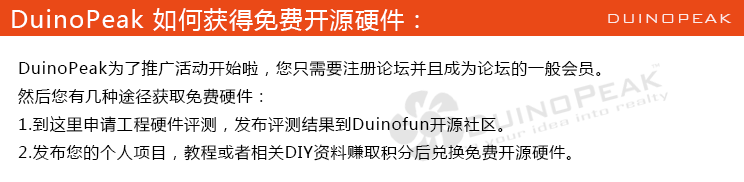
<style>
.page{position:relative;width:744px;height:182px;background:#ffffff}
.page>*{position:absolute;margin:0}
.t1{font:24px "MicrosoftYaHei";letter-spacing:0.05em;color:#ffffff}
.t2{font:18px "BankGothicBT-Light";letter-spacing:0.05em;color:#ffffff}
.t3{font:16px "MicrosoftYaHei";letter-spacing:0.05em;color:#000000}
</style>
<div class="page">
<p class="t1" style="left:12px;top:8px;width:407px;height:23px">DuinoPeak 如何获得免费开源硬件：</p>
<p class="t2" style="left:608px;top:14px;width:124px;height:9px;opacity:0.85">DUINOPEAK</p>
<p class="t3" style="left:18px;top:60px;width:583px;height:101px">DuinoPeak为了推广活动开始啦，您只需要注册论坛并且成为论坛的一般会员。<br>然后您有几种途径获取免费硬件：<br>1.到这里申请工程硬件评测，发布评测结果到Duinofun开源社区。<br>2.发布您的个人项目，教程或者相关DIY资料赚取积分后兑换免费开源硬件。</p>
</div>
